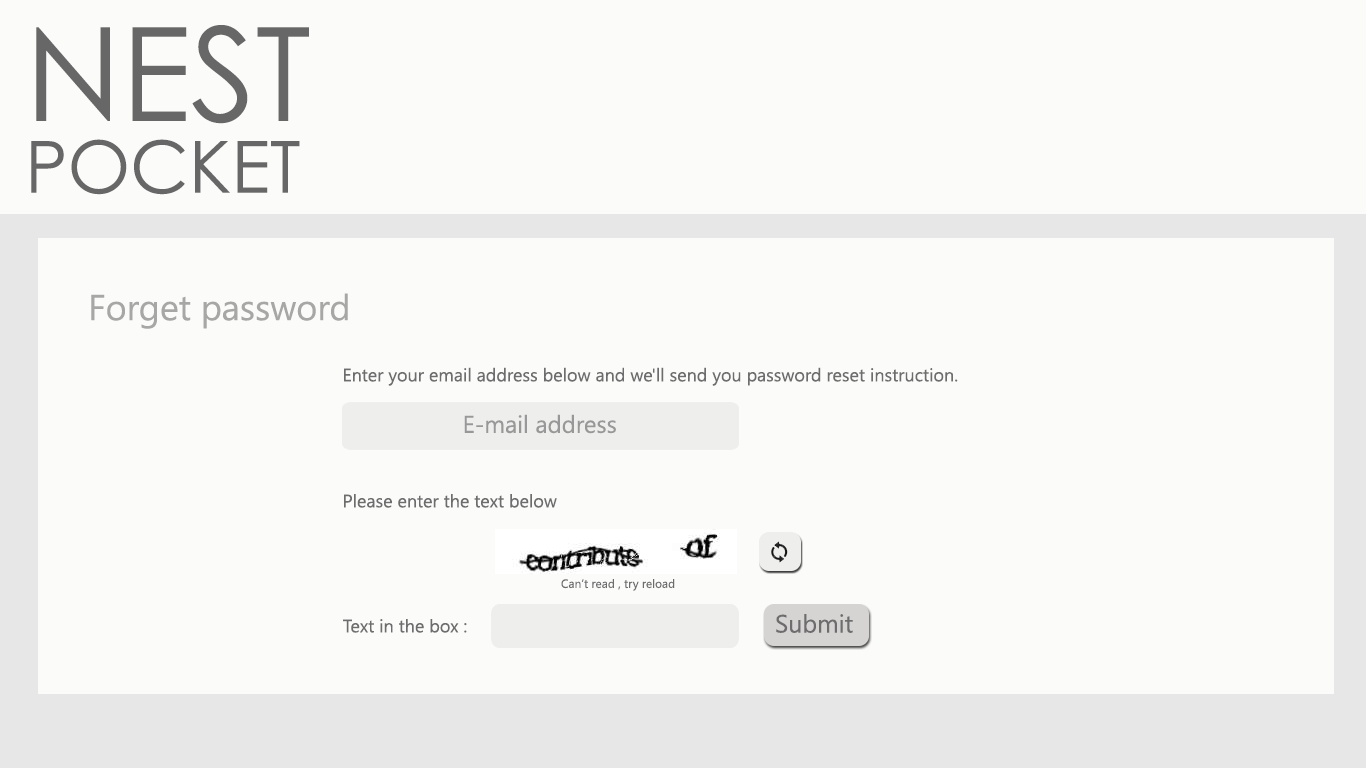
<style>
.page{position:relative;width:1366px;height:768px;background:#fbfbfa}
.page>*{position:absolute;margin:0}
.t1{font:130px "CenturyGothic";color:#676767}
.t2{font:90px "CenturyGothic";color:#676767}
.t3{font:72px "CenturyGothic";color:#676767}
.t4{font:36px "SegoeUI";color:#a7a7a6}
.t5{font:18px "SegoeUI";color:#6d6d6d}
.t6{font:24px "SegoeUI";color:#999898}
.t7{font:12px "SegoeUI";color:#6d6d6d}
.t8{font:25px "SegoeUI";color:#6d6d6d}
</style>
<div class="page">
<p class="t1" style="left:36px;top:25px;width:273px;height:99px"><span class="t2"><br></span>NEST</p>
<p class="t3" style="left:31px;top:139px;width:269px;height:56px">POCKET</p>
<p class="t4" style="left:91px;top:293px;width:257px;height:36px">Forget password</p>
<p class="t5" style="left:344px;top:367px;width:614px;height:19px">Enter your email address below and we'll send you password reset instruction.</p>
<p class="t6" style="left:464px;top:414px;width:152px;height:20px">E-mail address</p>
<p class="t5" style="left:344px;top:494px;width:213px;height:14px">Please enter the text below</p>
<p class="t7" style="left:561px;top:579px;width:114px;height:12px">Can’t read , try reload</p>
<p class="t8" style="left:776px;top:614px;width:77px;height:19px">Submit</p>
<p class="t5" style="left:343px;top:619px;width:124px;height:14px">Text in the box :</p>
</div>
